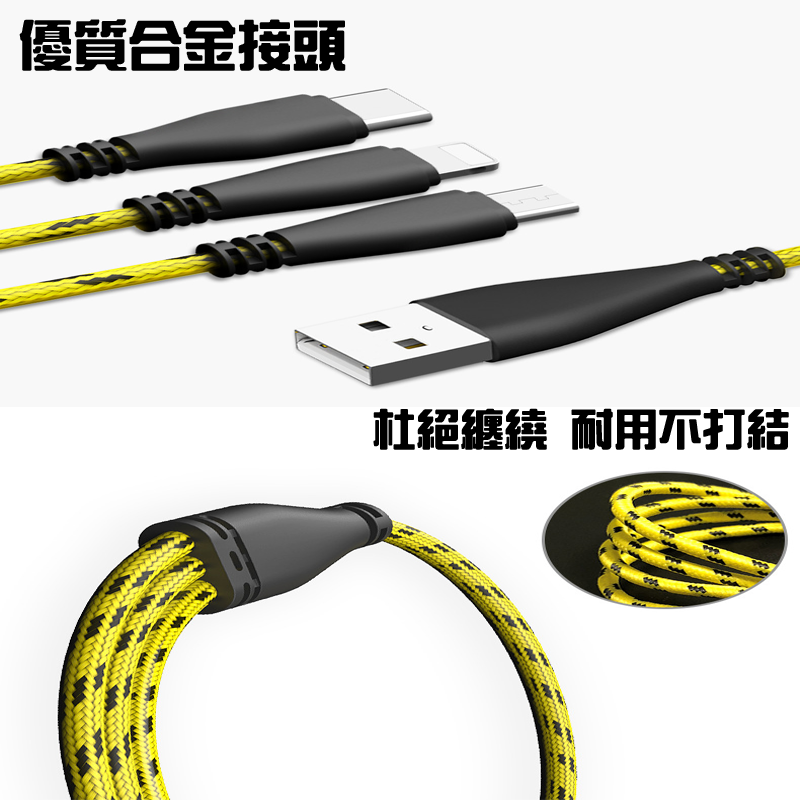
<style>
.page{position:relative;width:800px;height:800px;background:#f8f8f8}
.page>*{position:absolute;margin:0}
.t1{font:53.5px "HanWangZonYi";color:#000000;font-weight:bold}
.t2{font:42.8px "HanWangZonYi";color:#000000;font-weight:bold}
</style>
<div class="page">
<p class="t1" style="left:19px;top:19px;width:327px;height:52px">優質合金接頭</p>
<p class="t2" style="left:373px;top:408px;width:416px;height:42px">杜絕纏繞 耐用不打結</p>
</div>
